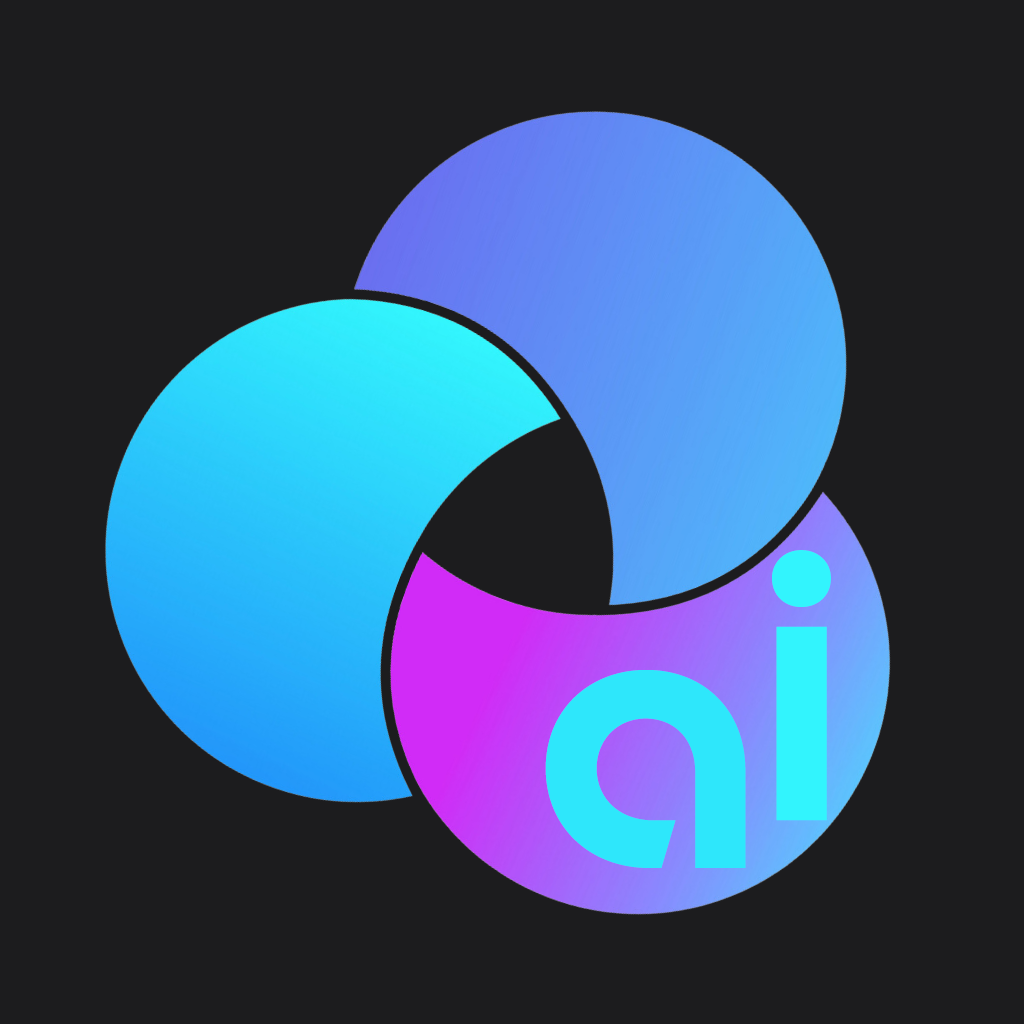
<style>
.page{position:relative;width:1024px;height:1024px;background:#1c1c1e}
.page>*{position:absolute;margin:0}
.t1{font:400px "NewAstro-SemiBold";color:#32f4fd}
.t2{font:400px "NewAstro-SemiBold";color:#2ee7fb}
</style>
<div class="page">
<p class="t1" style="left:772px;top:550px;width:59px;height:271px">i</p>
<p class="t2" style="left:545px;top:670px;width:201px;height:198px">a</p>
</div>
